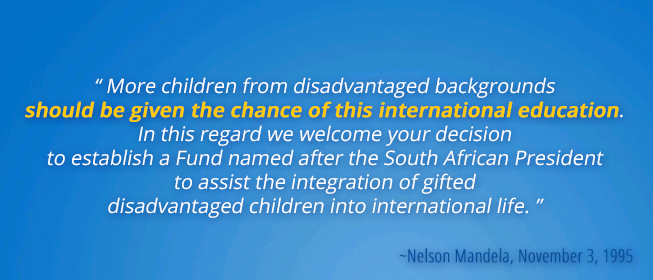
<style>
.page{position:relative;width:653px;height:280px}
.page>*{position:absolute;margin:0}
.t1{font:20px "OpenSans";color:#ffffff;font-style:italic}
.t2{font:20px "OpenSans-Semibold";color:#ffcb08;font-weight:bold;font-style:italic}
.t3{font:18px "OpenSans-CondensedLight";color:#08519c;font-weight:bold}
</style>
<div class="page">
<p class="t1" style="left:25px;top:77px;width:598px;height:141px;text-align:center">“ More children from disadvantaged backgrounds<br><span class="t2">should be given the chance of this international education</span>.<br>In this regard we welcome your decision<br>to establish a Fund named after the South African President<br>to assist the integration of gifted<br>disadvantaged children into international life. ”</p>
<p class="t3" style="left:399px;top:248px;width:234px;height:17px">~Nelson Mandela, November 3, 1995</p>
</div>
